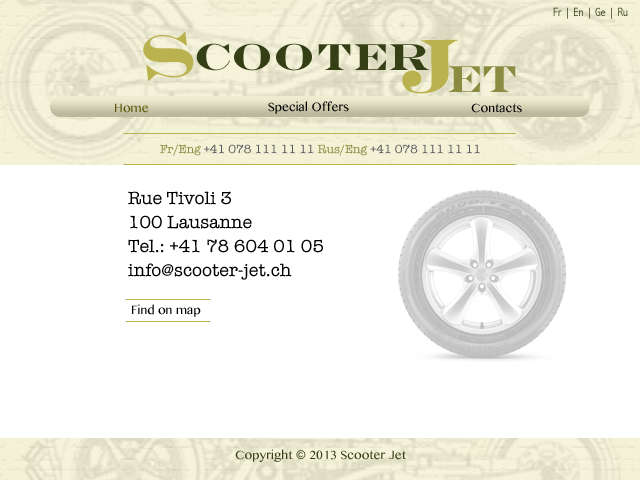
<style>
.page{position:relative;width:640px;height:480px;background:#ffffff}
.page>*{position:absolute;margin:0}
.t1{font:12px "AbadiMT-CondensedLight";letter-spacing:0.005em}
.t2{font:62.6px "EngraversMT-Bold";letter-spacing:0.005em;color:#bab24e}
.t3{font:77px "EngraversMT-Bold";letter-spacing:0.005em;color:#bab24e}
.t4{font:37.8px "EngraversMT-Bold";letter-spacing:0.005em;color:#353f15}
.t5{font:37.8px "EngraversMT-Bold";letter-spacing:0.005em;color:#8b8b41}
.t6{font:12px "BanglaMN";letter-spacing:0.005em;color:#000000}
.t7{font:12px "BanglaMN";letter-spacing:0.005em;color:#5d5604}
.t8{font:12px "BanglaMN";letter-spacing:0.005em;color:#010101}
.t9{font:12px "AmericanTypewriter";letter-spacing:0.005em;color:#56555b}
.t10{font:12px "AmericanTypewriter";letter-spacing:0.005em;color:#8b8b41}
.t11{font:18px/24px "AmericanTypewriter";letter-spacing:0.005em;color:#000000}
.t12{font:12px "BanglaMN";letter-spacing:0.005em;color:#353f15}
</style>
<div class="page">
<p class="t1" style="left:553px;top:7px;width:75px;height:12px">Fr | En | Ge | Ru</p>
<p class="t2" style="left:143px;top:32px;width:51px;height:49px;rotate:-7deg">S</p>
<p class="t3" style="left:402px;top:39px;width:56px;height:55px;rotate:-1deg">J</p>
<p class="t4" style="left:196px;top:43px;width:234px;height:28px">cooter</p>
<p class="t5" style="left:448px;top:66px;width:68px;height:26px">et</p>
<p class="t6" style="left:268px;top:101px;width:81px;height:13px">Special Offers</p>
<p class="t7" style="left:115px;top:103px;width:34px;height:10px">Home</p>
<p class="t8" style="left:471px;top:103px;width:51px;height:10px">Contacts</p>
<p class="t9" style="left:160px;top:144px;width:320px;height:12px"><span class="t10">Fr/Eng </span>+41 078 111 11 11 <span class="t10">Rus/Eng </span>+41 078 111 11 11</p>
<p class="t11" style="left:128px;top:191px;width:195px;height:89px">Rue Tivoli 3<br>100 Lausanne<br>Tel.: +41 78 604 01 05<br>info@scooter-jet.ch</p>
<p class="t6" style="left:132px;top:304px;width:69px;height:13px">Find on map</p>
<p class="t12" style="left:235px;top:449px;width:171px;height:13px">Copyright © 2013 Scooter Jet</p>
</div>
